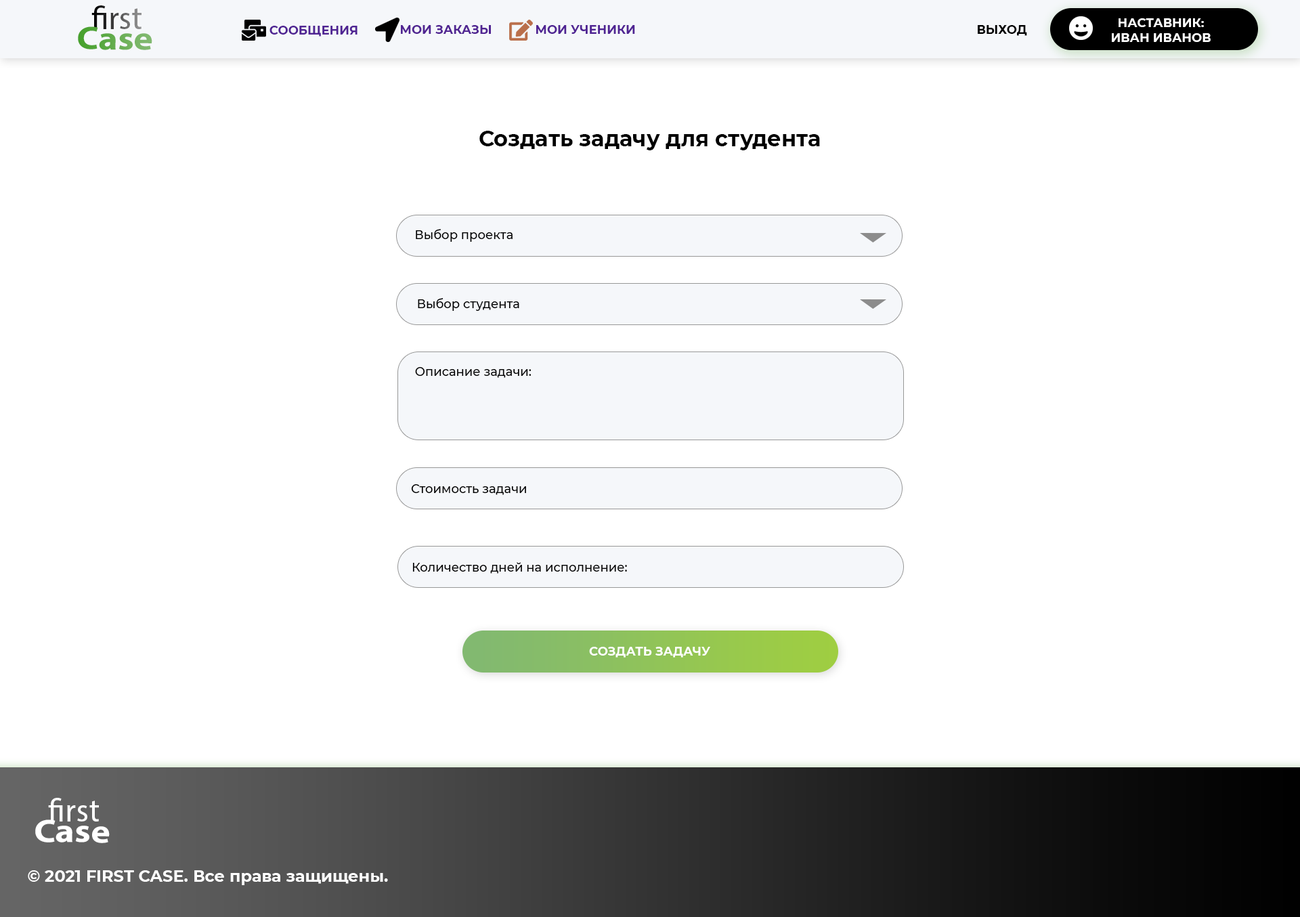
<style>
.page{position:relative;width:1300px;height:917px;background:#ffffff}
.page>*{position:absolute;margin:0}
.t1{font:32.5px "MyriadPro-Regular"}
.t2{font:32.5px "MyriadPro-Bold";scale:1.13 1}
.t3{font:32.5px "MyriadPro-Regular";scale:1.13 1}
.t4{font:12.2px "Montserrat-Bold";color:#4f2492;text-transform:uppercase}
.t5{font:12.2px "Montserrat-Bold";color:#502492;text-transform:uppercase}
.t6{font:12.2px "Montserrat-Bold";color:#000000;text-transform:uppercase}
.t7{font:12.2px "Montserrat-Bold";color:#ffffff;text-transform:uppercase}
.t8{font:21.7px "Montserrat-Bold";color:#000000}
.t9{font:12.2px "Montserrat-Medium";color:#000000}
.t10{font:32.5px "MyriadPro-Regular";color:#ffffff}
.t11{font:32.5px "MyriadPro-Bold";color:#ffffff;scale:1.13 1}
.t12{font:32.5px "MyriadPro-Regular";color:#ffffff;scale:1.13 1}
.t13{font:16.3px "Montserrat-Bold";color:#ffffff}
</style>
<div class="page">
<p class="t1" style="left:91px;top:5px;width:51px;height:24px">first</p>
<p class="t2" style="left:78px;top:26px;width:74px;height:24px;rotate:1deg"><span class="t3">       </span>Case</p>
<p class="t4" style="left:270px;top:26px;width:88px;height:11px">СООБЩЕНИЯ</p>
<p class="t5" style="left:401px;top:25px;width:90px;height:9px">МОИ ЗАКАЗЫ</p>
<p class="t4" style="left:536px;top:25px;width:99px;height:9px">мои ученики</p>
<p class="t6" style="left:978px;top:25px;width:49px;height:11px">ВЫХОД</p>
<p class="t7" style="left:1112px;top:18px;width:99px;height:24px;text-align:center">наставник:<br>иВАН иВАНОВ</p>
<p class="t8" style="left:480px;top:131px;width:340px;height:19px">Создать задачу для студента</p>
<p class="t9" style="left:416px;top:229px;width:97px;height:13px">Выбор проекта</p>
<p class="t9" style="left:418px;top:298px;width:101px;height:13px">Выбор студента</p>
<p class="t9" style="left:415px;top:367px;width:117px;height:11px">Описание задачи:</p>
<p class="t9" style="left:411px;top:484px;width:115px;height:11px">Стоимость задачи</p>
<p class="t9" style="left:412px;top:562px;width:215px;height:12px">Количество дней на исполнение:</p>
<p class="t7" style="left:589px;top:647px;width:121px;height:11px">СОЗДАТЬ задачу</p>
<p class="t10" style="left:48px;top:798px;width:51px;height:24px">first</p>
<p class="t11" style="left:35px;top:819px;width:75px;height:24px;rotate:1deg"><span class="t12">       </span>Case</p>
<p class="t13" style="left:28px;top:870px;width:360px;height:15px">© 2021 FIRST CASE. Все права защищены.</p>
</div>
